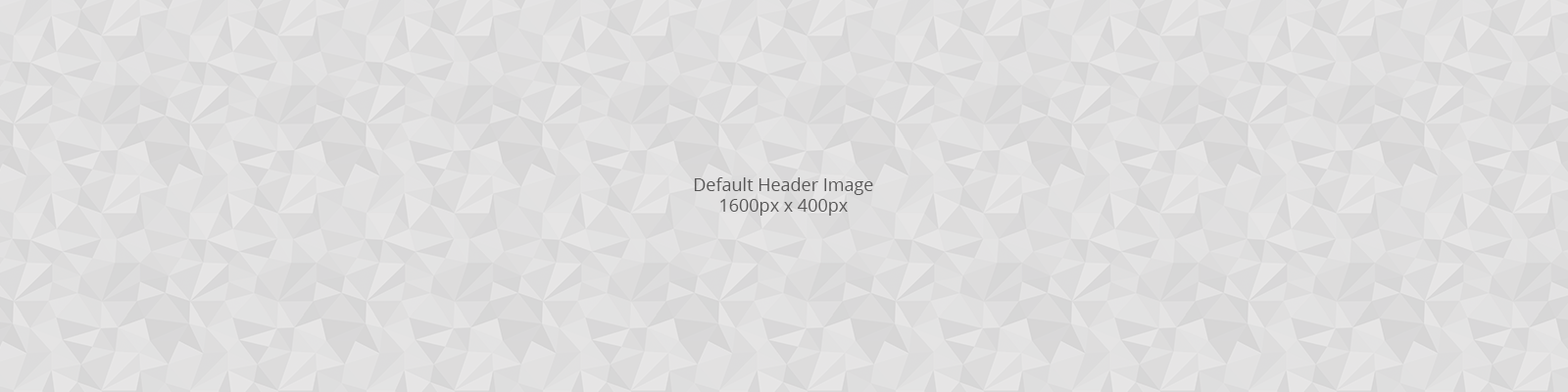
<style>
.page{position:relative;width:1568px;height:392px}
.page>*{position:absolute;margin:0}
.t1{font:17.6px "OpenSans";color:#585757}
</style>
<div class="page">
<p class="t1" style="left:694px;top:177px;width:179px;height:39px;text-align:center">Default Header Image<br>1600px x 400px</p>
</div>
